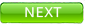
<style>
.page{position:relative;width:85px;height:24px}
.page>*{position:absolute;margin:0}
.t1{font:14px "Cantarell-Regular";color:#fdfdfd}
</style>
<div class="page">
<p class="t1" style="left:25px;top:7px;width:37px;height:11px">NEXT</p>
</div>
